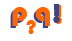
<style>
.page{position:relative;width:72px;height:41px;background:#ffffff}
.page>*{position:absolute;margin:0}
.t1{font:28.2px "Bauhaus93";color:#41437e}
.t2{font:28.2px "Bauhaus93"}
.t3{font:28.2px "Bauhaus93";color:#ff6600}
.t4{font:21.2px "Bauhaus93";color:#ff6600}
</style>
<div class="page">
<p class="t1" style="left:53px;top:4px;width:7px;height:19px">!</p>
<p class="t2" style="left:55px;top:5px;width:7px;height:19px">!</p>
<p class="t2" style="left:10px;top:9px;width:38px;height:19px">p q</p>
<p class="t3" style="left:12px;top:7px;width:38px;height:19px">p q</p>
<p class="t4" style="left:26px;top:20px;width:10px;height:14px">?</p>
</div>
